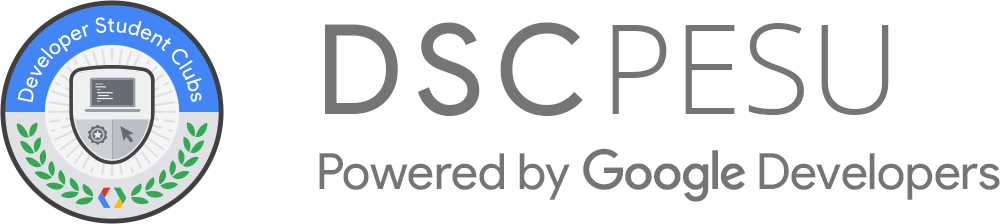
<style>
.page{position:relative;width:1000px;height:224px;background:#ffffff}
.page>*{position:absolute;margin:0}
.t1{font:50px/75px "ProductSans-Regular";color:#757575}
.t2{font:125px/75px "ProductSans-Regular";letter-spacing:0.1em;color:#757575}
.t3{font:125px/75px "OpenSans-Light";color:#757575}
</style>
<div class="page">
<p class="t1" style="left:319px;top:22px;width:681px;height:180px"><span class="t2">DSC</span><span class="t3">PESU<br></span>Powered by google_logo Developers</p>
</div>
